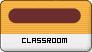
<style>
.page{position:relative;width:92px;height:52px;background:#f7b952}
.page>*{position:absolute;margin:0}
.t1{font:8px "04b03b";color:#000000}
</style>
<div class="page">
<p class="t1" style="left:22px;top:38px;width:45px;height:5px">CLASSROOM</p>
</div>
